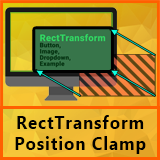
<style>
.page{position:relative;width:160px;height:160px}
.page>*{position:absolute;margin:0}
.t1{font:17.9px "Gadugi-Bold";letter-spacing:0.05em;color:#000000;scale:0.95 1}
</style>
<div class="page">
<p class="t1" style="left:15px;top:115px;width:131px;height:39px;text-align:center">RectTransform<br>Position Clamp</p>
</div>
